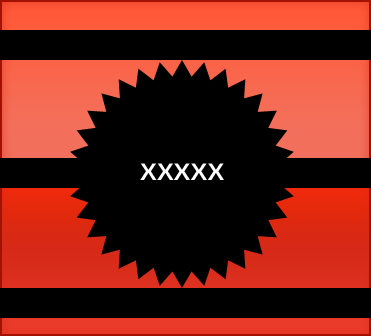
<style>
.page{position:relative;width:371px;height:336px;background:#000000}
.page>*{position:absolute;margin:0}
.t1{font:28px "ShinGoPro-Medium";letter-spacing:-0.03em;color:#ffffff}
</style>
<div class="page">
<p class="t1" style="left:140px;top:163px;width:84px;height:17px">xxxxx</p>
</div>
